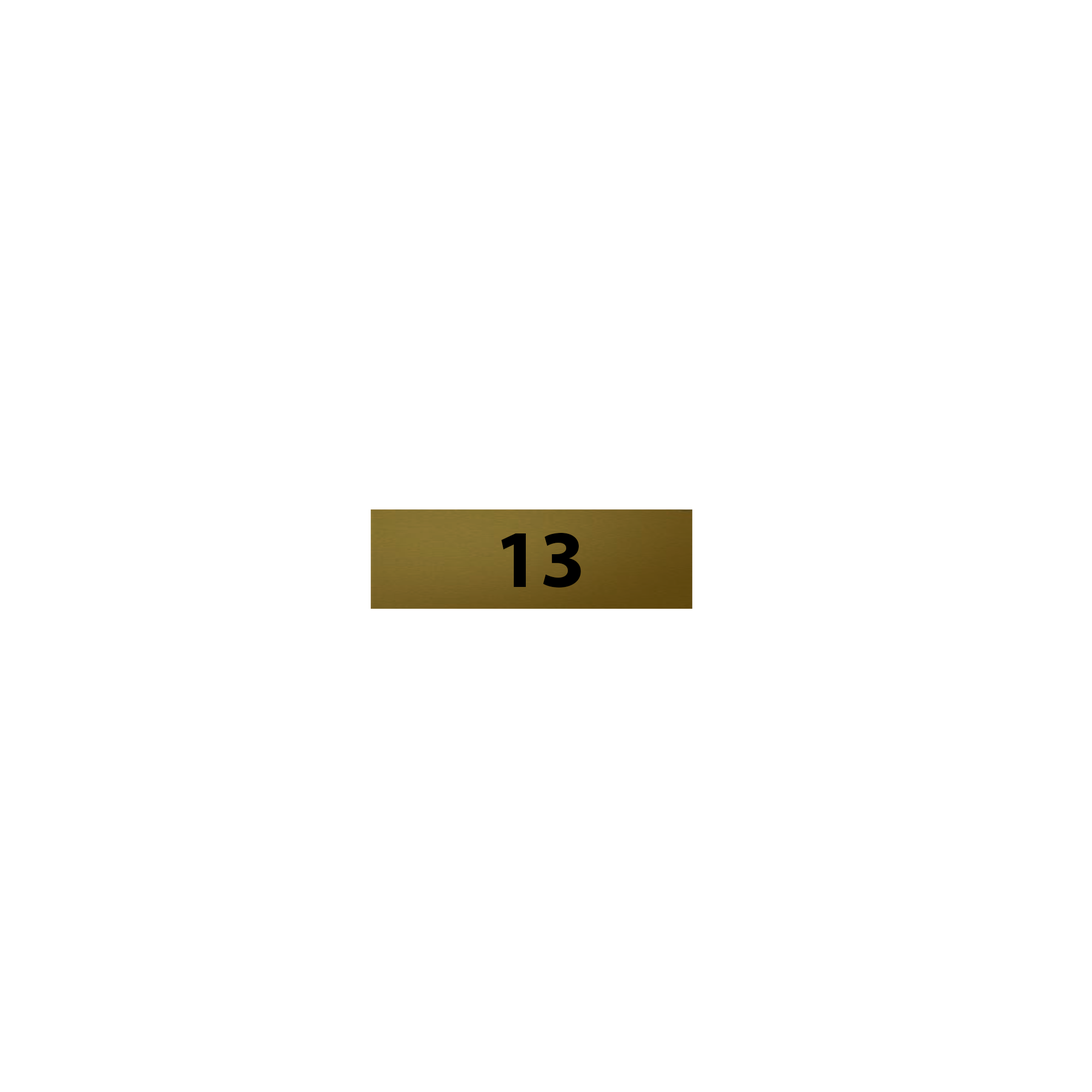
<style>
.page{position:relative;width:1092px;height:1092px;background:#ffffff}
.page>*{position:absolute;margin:0}
.t1{font:81.9px "MyriadPro-Bold";color:#000000}
</style>
<div class="page">
<p class="t1" style="left:501px;top:533px;width:80px;height:54px">13</p>
</div>
